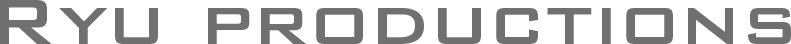
<style>
.page{position:relative;width:791px;height:44px;background:#ffffff}
.page>*{position:absolute;margin:0}
.t1{font:85.6px "BankGothicBT-Medium";color:#707070}
</style>
<div class="page">
<p class="t1" style="left:0px;top:0px;width:791px;height:44px">Ryu productions</p>
</div>
